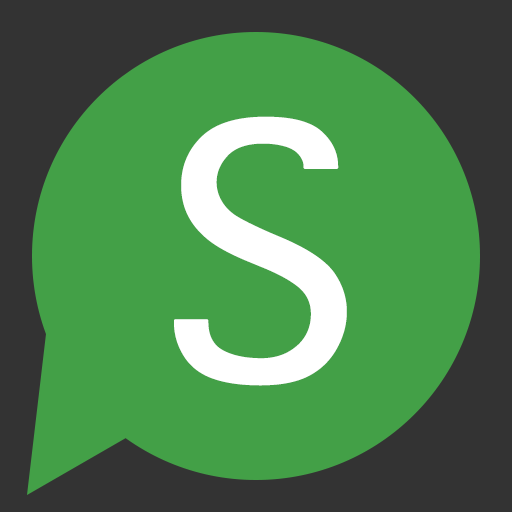
<style>
.page{position:relative;width:512px;height:512px;background:#43a047}
.page>*{position:absolute;margin:0}
.t1{font:332.3px "Sathu";letter-spacing:-0.06em;color:#ffffff;font-weight:bold}
</style>
<div class="page">
<p class="t1" style="left:174px;top:116px;width:173px;height:270px">S</p>
</div>
